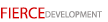
<style>
.page{position:relative;width:108px;height:22px;background:#ffffff}
.page>*{position:absolute;margin:0}
.t1{font:16px "MyriadPro-Regular";color:#d70000}
.t2{font:9px "MyriadPro-Regular";color:#959191}
</style>
<div class="page">
<p class="t1" style="left:1px;top:7px;width:44px;height:12px">FIERCE</p>
<p class="t2" style="left:45px;top:11px;width:57px;height:7px">DEVELOPMENT</p>
</div>
